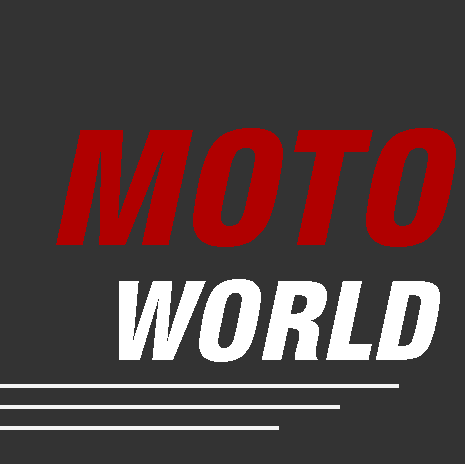
<style>
.page{position:relative;width:465px;height:464px;background:#333333}
.page>*{position:absolute;margin:0}
.t1{font:160px "HebarCondBlack-Italic";color:#b00000}
.t2{font:110px "HebarCondBlack-Italic";color:#ffffff}
</style>
<div class="page">
<p class="t1" style="left:56px;top:128px;width:400px;height:119px">MOTO</p>
<p class="t2" style="left:119px;top:279px;width:321px;height:83px">WORLD</p>
</div>
